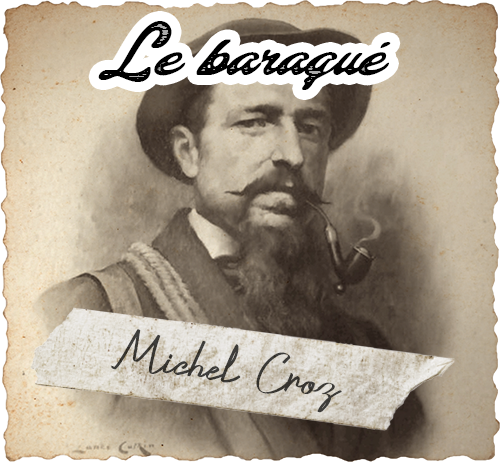
<style>
.page{position:relative;width:500px;height:462px}
.page>*{position:absolute;margin:0}
.t1{font:54.2px "ColinasPersonalUse-Regular";color:#000000}
.t2{font:54.2px "CrustaceansSignatureDEMO-Reg";color:#3b3a36}
</style>
<div class="page">
<p class="t1" style="left:98px;top:21px;width:293px;height:69px">Le baraqué</p>
<p class="t2" style="left:111px;top:329px;width:231px;height:84px;rotate:9deg">Michel Croz</p>
</div>
